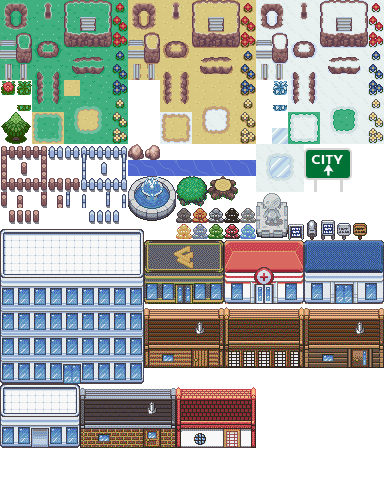
<style>
.page{position:relative;width:384px;height:480px;background:#ffffff}
.page>*{position:absolute;margin:0}
.t1{font:11.9px "JosefinSans-Bold";color:#ffffff;scale:1.15 1}
</style>
<div class="page">
<p class="t1" style="left:311px;top:155px;width:32px;height:9px">CITY</p>
</div>
